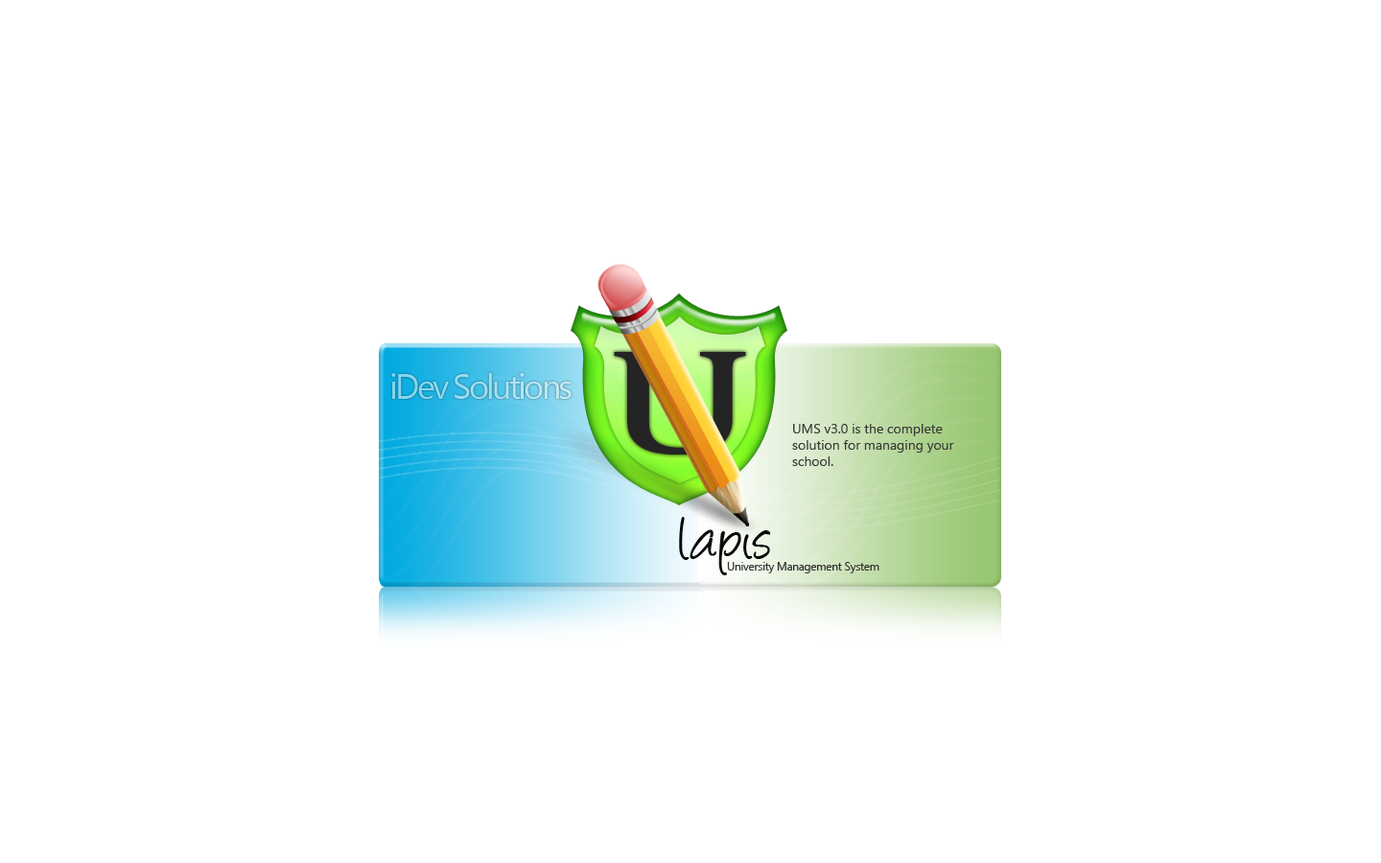
<style>
.page{position:relative;width:1381px;height:863px;background:#ffffff}
.page>*{position:absolute;margin:0}
.t1{font:34.5px "SegoeUI";letter-spacing:-0.075em}
.t2{font:13.4px "SegoeUI";color:#3a3b37}
.t3{font:69.1px "Angelina";letter-spacing:-0.025em;color:#0a0a09}
.t4{font:11.5px "SegoeUI";letter-spacing:-0.025em;color:#333333}
</style>
<div class="page">
<p class="t1" style="left:391px;top:373px;width:181px;height:26px">iDev Solutions</p>
<p class="t2" style="left:792px;top:424px;width:162px;height:42px">UMS v3.0 is the complete solution for managing your school.</p>
<p class="t3" style="left:679px;top:517px;width:92px;height:59px">lapis</p>
<p class="t4" style="left:727px;top:562px;width:153px;height:12px">University Management System</p>
</div>
